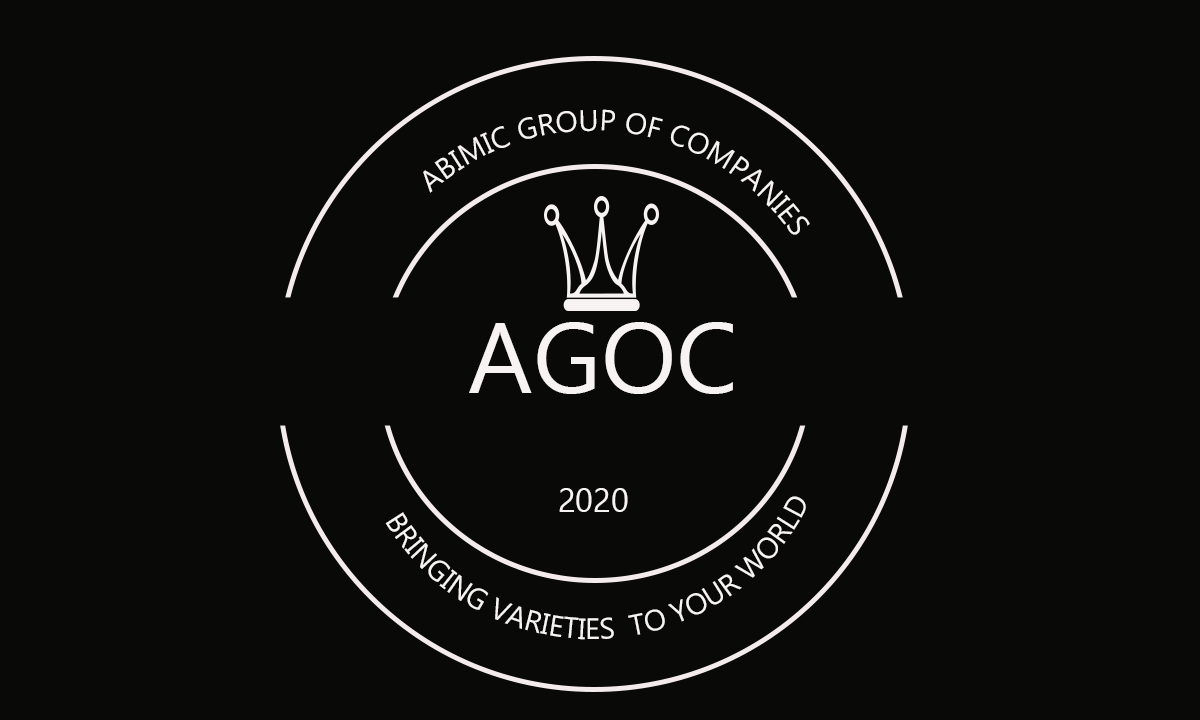
<style>
.page{position:relative;width:1200px;height:720px;background:#090908}
.page>*{position:absolute;margin:0}
.t1{font:29.4px "Gadugi";color:#f7f3f3}
.t2{font:100px "Gadugi";color:#f7f3f3}
.t3{font:33.3px "Gadugi";color:#f7f3f3}
</style>
<div class="page">
<p class="t1" style="left:423px;top:109px;width:387px;height:126px;rotate:-3deg">ABIMIC GROUP OF COMPANIES</p>
<p class="t2" style="left:469px;top:322px;width:264px;height:72px">AGOC</p>
<p class="t1" style="left:385px;top:496px;width:421px;height:144px;rotate:-3deg">BRINGING VARIETIES  TO YOUR WORLD</p>
<p class="t3" style="left:559px;top:488px;width:69px;height:24px">2020</p>
</div>
